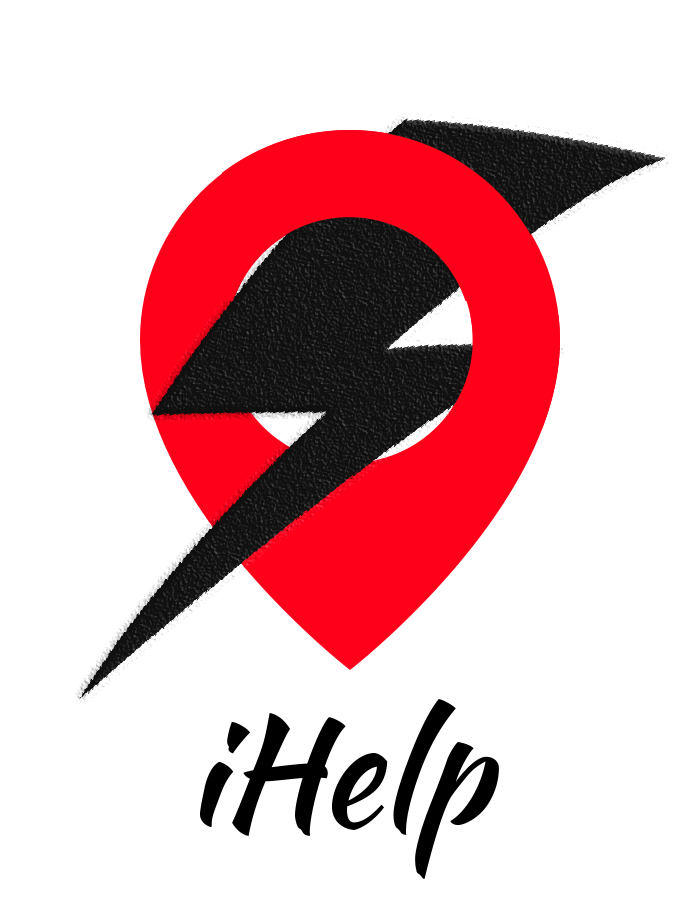
<style>
.page{position:relative;width:700px;height:900px;background:#ffffff}
.page>*{position:absolute;margin:0}
.t1{font:150px "KaushanScript-Regular";color:#000000}
</style>
<div class="page">
<p class="t1" style="left:200px;top:699px;width:299px;height:180px">iHelp</p>
</div>
